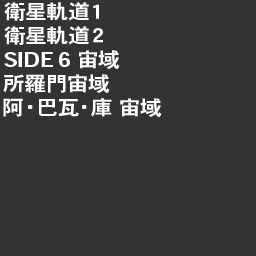
<style>
.page{position:relative;width:256px;height:256px;background:#333333}
.page>*{position:absolute;margin:0}
.t1{font:20px "HeiseiKakuGoStd-W7";color:#ffffff;scale:1.09 1}
</style>
<div class="page">
<p class="t1" style="left:4px;top:2px;width:95px;height:19px">衛星軌道１</p>
<p class="t1" style="left:4px;top:26px;width:99px;height:19px">衛星軌道２</p>
<p class="t1" style="left:4px;top:50px;width:116px;height:19px">SIDE 6 宙域</p>
<p class="t1" style="left:3px;top:74px;width:107px;height:19px">所羅門宙域</p>
<p class="t1" style="left:3px;top:98px;width:159px;height:19px">阿・巴瓦・庫 宙域</p>
</div>
